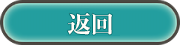
<style>
.page{position:relative;width:180px;height:45px;background:#239e9f}
.page>*{position:absolute;margin:0}
.t1{font:24px "RyuminPr6N-ExBold";color:#fffef8}
</style>
<div class="page">
<p class="t1" style="left:67px;top:13px;width:45px;height:22px">返回</p>
</div>
